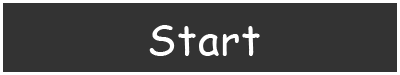
<style>
.page{position:relative;width:400px;height:75px;background:#333333}
.page>*{position:absolute;margin:0}
.t1{font:41.7px "ComicSansMS";letter-spacing:0.02em;color:#ffffff}
</style>
<div class="page">
<p class="t1" style="left:149px;top:25px;width:111px;height:31px">Start</p>
</div>
